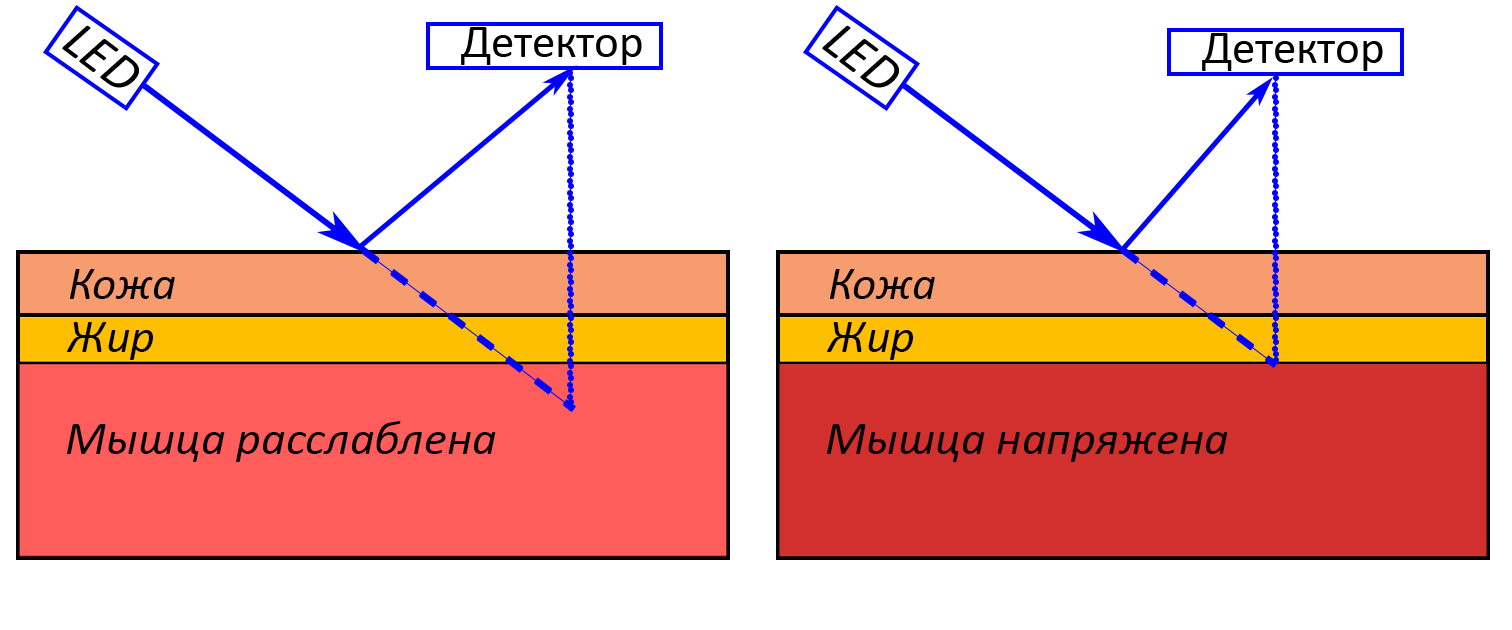
<style>
.page{position:relative;width:1512px;height:630px;background:#ffffff}
.page>*{position:absolute;margin:0}
.t1{font:53.3px "Calibri-Italic";color:#000000}
.t2{font:46.7px "Calibri";color:#000000}
.t3{font:46.7px "Calibri-Italic";color:#000000}
.t4{font:48px "Calibri-Italic";color:#000000}
</style>
<div class="page">
<p class="t1" style="left:62px;top:25px;width:77px;height:63px;rotate:37deg">LED</p>
<p class="t2" style="left:461px;top:27px;width:181px;height:38px">Детектор</p>
<p class="t1" style="left:822px;top:25px;width:77px;height:63px;rotate:37deg">LED</p>
<p class="t2" style="left:1202px;top:33px;width:181px;height:38px">Детектор</p>
<p class="t3" style="left:69px;top:269px;width:106px;height:30px">Кожа</p>
<p class="t3" style="left:829px;top:269px;width:106px;height:30px">Кожа</p>
<p class="t4" style="left:67px;top:322px;width:87px;height:38px">Жир</p>
<p class="t4" style="left:827px;top:322px;width:87px;height:38px">Жир</p>
<p class="t4" style="left:67px;top:421px;width:429px;height:41px">Мышца расслаблена</p>
<p class="t4" style="left:827px;top:424px;width:401px;height:38px">Мышца напряжена</p>
</div>
